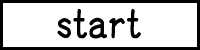
<style>
.page{position:relative;width:200px;height:50px;background:#ffffff}
.page>*{position:absolute;margin:0}
.t1{font:38.5px "YOzFontN-ProN-R";letter-spacing:0.03em;color:#000000;font-weight:bold;scale:0.91 1}
</style>
<div class="page">
<p class="t1" style="left:57px;top:9px;width:84px;height:30px">start</p>
</div>
